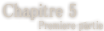
<style>
.page{position:relative;width:104px;height:31px;background:#ffffff}
.page>*{position:absolute;margin:0}
.t1{font:19px "MS-PMincho";color:#d6cdc1;font-weight:bold;scale:0.84 1}
.t2{font:11.4px "MS-PMincho";color:#d6cdc1;font-weight:bold;scale:0.84 1}
</style>
<div class="page">
<p class="t1" style="left:3px;top:3px;width:73px;height:17px">Chapitre 5</p>
<p class="t2" style="left:39px;top:21px;width:64px;height:10px">Premiere partie</p>
</div>
